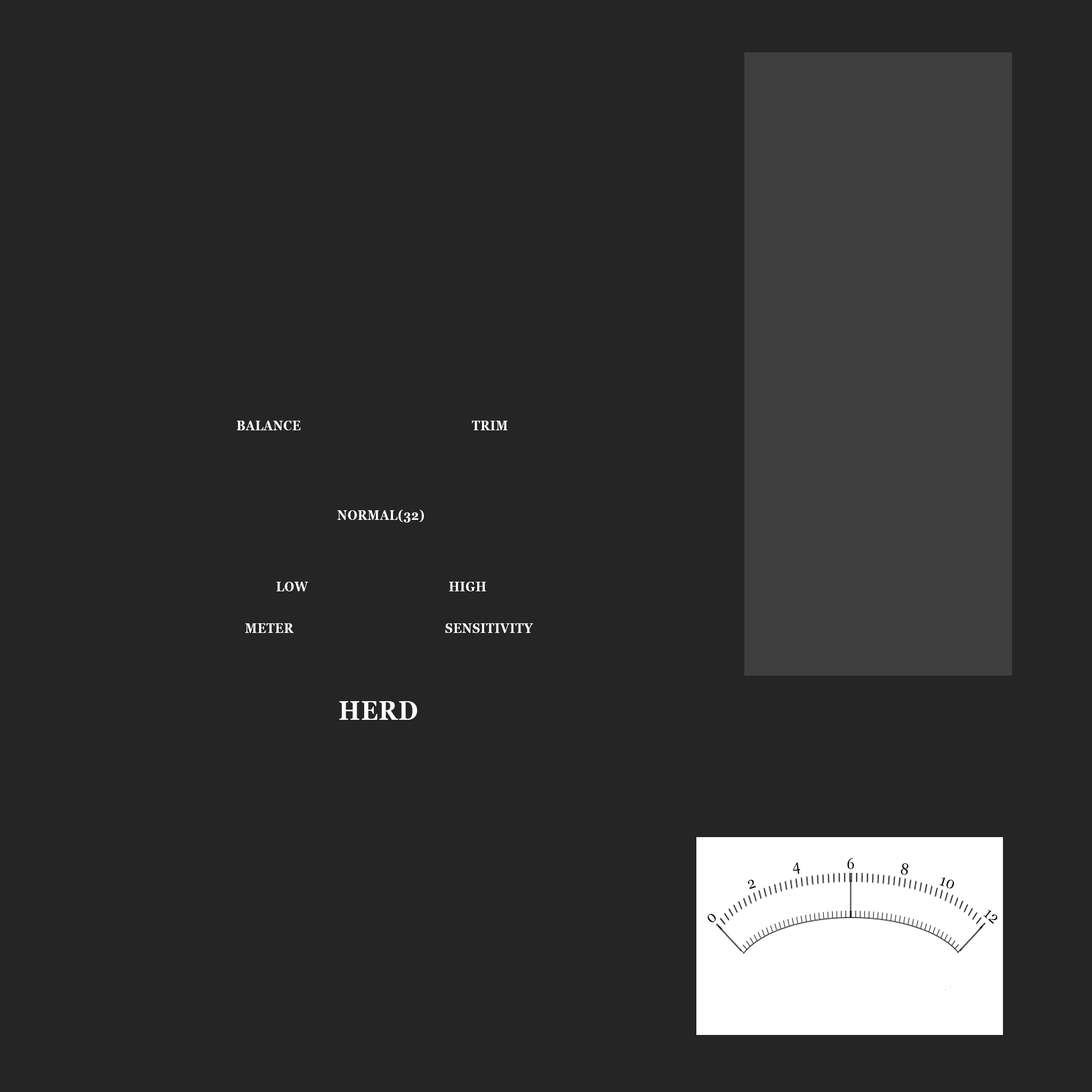
<style>
.page{position:relative;width:1092px;height:1092px;background:#252525}
.page>*{position:absolute;margin:0}
.t1{font:13.3px "Georgia-Bold";letter-spacing:0.04em;color:#ffffff;scale:0.88 1}
.t2{font:26.7px "Georgia-Bold";letter-spacing:0.04em;color:#ffffff;scale:0.88 1}
.t3{font:16px "Georgia";letter-spacing:0.04em;color:#000000;scale:0.88 1}
</style>
<div class="page">
<p class="t1" style="left:237px;top:421px;width:64px;height:9px">BALANCE</p>
<p class="t1" style="left:472px;top:421px;width:36px;height:9px">TRIM</p>
<p class="t1" style="left:337px;top:510px;width:87px;height:13px">NORMAL(32)</p>
<p class="t1" style="left:276px;top:582px;width:210px;height:9px">LOW        HIGH</p>
<p class="t1" style="left:245px;top:623px;width:49px;height:10px">METER</p>
<p class="t1" style="left:445px;top:623px;width:88px;height:10px">SENSITIVITY</p>
<p class="t2" style="left:339px;top:701px;width:78px;height:19px">HERD</p>
<p class="t3" style="left:847px;top:858px;width:7px;height:11px">6</p>
<p class="t3" style="left:793px;top:862px;width:7px;height:12px;rotate:-8deg">4</p>
<p class="t3" style="left:901px;top:863px;width:8px;height:12px;rotate:8deg">8</p>
<p class="t3" style="left:748px;top:880px;width:8px;height:9px;rotate:-18deg">2</p>
<p class="t3" style="left:939px;top:877px;width:15px;height:12px;rotate:18deg">10</p>
<p class="t3" style="left:708px;top:914px;width:8px;height:8px;rotate:-41deg">0</p>
<p class="t3" style="left:983px;top:910px;width:15px;height:14px;rotate:41deg">12</p>
</div>
